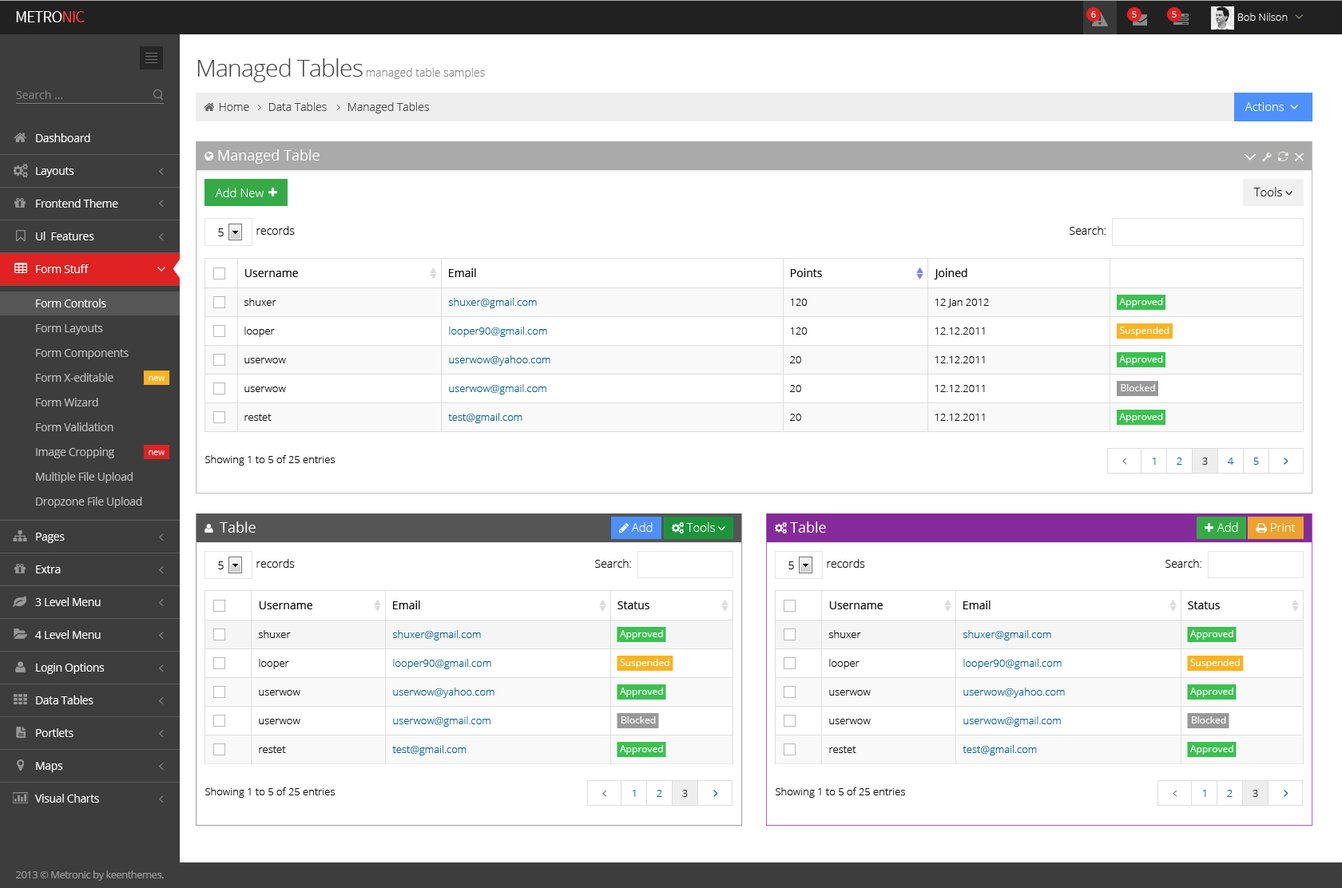
<style>
.page{position:relative;width:1342px;height:888px;background:#ffffff}
.page>*{position:absolute;margin:0}
.t1{font:16.7px "SourceSansPro-Regular";letter-spacing:-0.045em;color:#ffffff;text-transform:uppercase}
.t2{font:16.7px "SourceSansPro-Regular";letter-spacing:-0.045em;color:#ff3f3f;text-transform:uppercase}
.t3{font:8.8px "OpenSans-Light";color:#ffffff}
.t4{font:10.4px "OpenSans-Light";color:#ffffff}
.t5{font:24px "OpenSans-Light";letter-spacing:-0.025em;color:#444444}
.t6{font:11.2px "OpenSans-Light";color:#888888}
.t7{font:11.2px "OpenSans";color:#7d7d7d}
.t8{font:11.2px "OpenSans-Light";color:#444444}
.t9{font:12px "OpenSans-Light";color:#ffffff}
.t10{font:11.2px "OpenSans";letter-spacing:-0.025em;color:#ffffff}
.t11{font:14.4px "OpenSans";color:#ffffff}
.t12{font:12px "OpenSans-Light";color:#282626}
.t13{font:11.2px "OpenSans-Light";color:#131111}
.t14{font:11.2px "OpenSans";color:#131111}
.t15{font:11.2px "OpenSans";letter-spacing:-0.025em;color:#fefefe}
.t16{font:10.4px "OpenSans-Light";color:#131111}
.t17{font:10.4px "OpenSans-Light";color:#0d638f}
.t18{font:9.6px "OpenSans";color:#ffffff}
.t19{font:11.2px "OpenSans";letter-spacing:-0.025em;color:#bdbdbd}
.t20{font:10.4px "OpenSans-Light";letter-spacing:0.02em;color:#0d638f}
.t21{font:10.4px "OpenSans-Light";letter-spacing:0.02em;color:#2a2b2c}
.t22{font:10.4px "OpenSans";letter-spacing:-0.04em;color:#999999}
</style>
<div class="page">
<p class="t1" style="left:16px;top:11px;width:69px;height:11px">Metro<span class="t2">nic</span></p>
<p class="t3" style="left:1091px;top:11px;width:5px;height:7px">6</p>
<p class="t3" style="left:1132px;top:11px;width:5px;height:7px">5</p>
<p class="t3" style="left:1172px;top:11px;width:5px;height:7px">5</p>
<p class="t4" style="left:1238px;top:13px;width:50px;height:8px">Bob Nilson</p>
<p class="t5" style="left:197px;top:58px;width:166px;height:24px">Managed Tables</p>
<p class="t6" style="left:366px;top:68px;width:119px;height:11px">managed table samples</p>
<p class="t7" style="left:16px;top:90px;width:47px;height:9px">Search ...</p>
<p class="t8" style="left:220px;top:103px;width:29px;height:8px">Home</p>
<p class="t8" style="left:269px;top:102px;width:58px;height:9px">Data Tables</p>
<p class="t8" style="left:348px;top:102px;width:81px;height:11px">Managed Tables</p>
<p class="t9" style="left:1245px;top:102px;width:40px;height:9px">Actions</p>
<p class="t10" style="left:36px;top:133px;width:54px;height:9px">Dashboard</p>
<p class="t11" style="left:218px;top:149px;width:102px;height:15px">Managed Table</p>
<p class="t10" style="left:36px;top:167px;width:38px;height:10px">Layouts</p>
<p class="t9" style="left:215px;top:188px;width:49px;height:9px">Add New</p>
<p class="t12" style="left:1254px;top:187px;width:28px;height:10px">Tools</p>
<p class="t10" style="left:36px;top:199px;width:82px;height:9px">Frontend Theme</p>
<p class="t10" style="left:36px;top:232px;width:58px;height:8px">Ul  Features</p>
<p class="t13" style="left:218px;top:228px;width:6px;height:8px">5</p>
<p class="t13" style="left:256px;top:226px;width:39px;height:9px">records</p>
<p class="t13" style="left:1070px;top:226px;width:36px;height:9px">Search:</p>
<p class="t10" style="left:36px;top:264px;width:53px;height:9px">Form Stuff</p>
<p class="t14" style="left:244px;top:269px;width:54px;height:8px">Username</p>
<p class="t14" style="left:449px;top:268px;width:27px;height:9px">Email</p>
<p class="t14" style="left:791px;top:268px;width:31px;height:9px">Points</p>
<p class="t14" style="left:934px;top:268px;width:34px;height:12px">Joined</p>
<p class="t15" style="left:36px;top:299px;width:70px;height:9px">Form Controls</p>
<p class="t16" style="left:244px;top:298px;width:32px;height:8px">shuxer</p>
<p class="t17" style="left:448px;top:298px;width:89px;height:10px">shuxer@gmail.com</p>
<p class="t16" style="left:790px;top:299px;width:17px;height:7px">120</p>
<p class="t16" style="left:935px;top:299px;width:54px;height:9px">12 Jan 2012</p>
<p class="t18" style="left:1119px;top:298px;width:44px;height:10px">Approved</p>
<p class="t19" style="left:36px;top:324px;width:67px;height:11px">Form Layouts</p>
<p class="t16" style="left:244px;top:327px;width:31px;height:10px">looper</p>
<p class="t17" style="left:449px;top:327px;width:98px;height:10px">looper90@gmail.com</p>
<p class="t16" style="left:790px;top:328px;width:17px;height:7px">120</p>
<p class="t16" style="left:935px;top:328px;width:50px;height:7px">12.12.2011</p>
<p class="t18" style="left:1120px;top:327px;width:50px;height:9px">Suspended</p>
<p class="t19" style="left:36px;top:349px;width:93px;height:11px">Form Components</p>
<p class="t16" style="left:244px;top:358px;width:42px;height:6px">userwow</p>
<p class="t17" style="left:449px;top:356px;width:101px;height:10px">userwow@yahoo.com</p>
<p class="t16" style="left:790px;top:356px;width:11px;height:8px">20</p>
<p class="t16" style="left:935px;top:356px;width:50px;height:8px">12.12.2011</p>
<p class="t18" style="left:1119px;top:356px;width:44px;height:9px">Approved</p>
<p class="t19" style="left:36px;top:373px;width:77px;height:9px">Form X-editable</p>
<p class="t3" style="left:149px;top:376px;width:16px;height:5px">new</p>
<p class="t16" style="left:244px;top:387px;width:42px;height:5px">userwow</p>
<p class="t17" style="left:449px;top:384px;width:97px;height:11px">userwow@gmail.com</p>
<p class="t16" style="left:790px;top:385px;width:11px;height:7px">20</p>
<p class="t16" style="left:935px;top:385px;width:50px;height:7px">12.12.2011</p>
<p class="t18" style="left:1121px;top:384px;width:34px;height:7px">Blocked</p>
<p class="t19" style="left:36px;top:398px;width:62px;height:9px">Form Wizard</p>
<p class="t16" style="left:244px;top:414px;width:28px;height:7px">restet</p>
<p class="t17" style="left:448px;top:413px;width:75px;height:10px">test@gmail.com</p>
<p class="t16" style="left:790px;top:414px;width:11px;height:7px">20</p>
<p class="t16" style="left:935px;top:414px;width:50px;height:7px">12.12.2011</p>
<p class="t18" style="left:1119px;top:413px;width:44px;height:10px">Approved</p>
<p class="t19" style="left:36px;top:423px;width:77px;height:8px">Form Validation</p>
<p class="t19" style="left:36px;top:447px;width:78px;height:12px">Image Cropping</p>
<p class="t3" style="left:149px;top:451px;width:16px;height:4px">new</p>
<p class="t16" style="left:205px;top:455px;width:130px;height:11px">Showing 1 to 5 of 25 entries</p>
<p class="t20" style="left:1153px;top:458px;width:3px;height:7px">1</p>
<p class="t20" style="left:1177px;top:458px;width:5px;height:7px">2</p>
<p class="t21" style="left:1202px;top:458px;width:6px;height:7px">3</p>
<p class="t20" style="left:1227px;top:458px;width:7px;height:7px">4</p>
<p class="t20" style="left:1254px;top:458px;width:5px;height:7px">5</p>
<p class="t19" style="left:36px;top:472px;width:97px;height:11px">Multiple File Upload</p>
<p class="t19" style="left:36px;top:497px;width:106px;height:11px">Dropzone File Upload</p>
<p class="t11" style="left:220px;top:522px;width:36px;height:11px">Table</p>
<p class="t11" style="left:790px;top:522px;width:36px;height:11px">Table</p>
<p class="t10" style="left:36px;top:533px;width:29px;height:10px">Pages</p>
<p class="t9" style="left:631px;top:523px;width:22px;height:9px">Add</p>
<p class="t9" style="left:686px;top:523px;width:29px;height:9px">Tools</p>
<p class="t9" style="left:1217px;top:523px;width:21px;height:9px">Add</p>
<p class="t9" style="left:1271px;top:523px;width:25px;height:9px">Print</p>
<p class="t10" style="left:36px;top:566px;width:25px;height:8px">Extra</p>
<p class="t13" style="left:218px;top:562px;width:6px;height:8px">5</p>
<p class="t13" style="left:256px;top:559px;width:39px;height:9px">records</p>
<p class="t13" style="left:595px;top:559px;width:36px;height:9px">Search:</p>
<p class="t13" style="left:789px;top:562px;width:5px;height:8px">5</p>
<p class="t13" style="left:827px;top:559px;width:38px;height:9px">records</p>
<p class="t13" style="left:1166px;top:559px;width:36px;height:9px">Search:</p>
<p class="t10" style="left:35px;top:598px;width:66px;height:8px">3 Level Menu</p>
<p class="t14" style="left:259px;top:602px;width:53px;height:8px">Username</p>
<p class="t14" style="left:393px;top:601px;width:27px;height:9px">Email</p>
<p class="t14" style="left:618px;top:602px;width:32px;height:8px">Status</p>
<p class="t14" style="left:829px;top:602px;width:54px;height:8px">Username</p>
<p class="t14" style="left:964px;top:601px;width:27px;height:9px">Email</p>
<p class="t14" style="left:1188px;top:602px;width:32px;height:8px">Status</p>
<p class="t10" style="left:35px;top:630px;width:66px;height:9px">4 Level Menu</p>
<p class="t16" style="left:258px;top:630px;width:33px;height:8px">shuxer</p>
<p class="t17" style="left:392px;top:630px;width:89px;height:11px">shuxer@gmail.com</p>
<p class="t18" style="left:620px;top:630px;width:43px;height:10px">Approved</p>
<p class="t16" style="left:828px;top:630px;width:33px;height:8px">shuxer</p>
<p class="t17" style="left:963px;top:630px;width:88px;height:11px">shuxer@gmail.com</p>
<p class="t18" style="left:1190px;top:630px;width:44px;height:10px">Approved</p>
<p class="t10" style="left:36px;top:663px;width:69px;height:11px">Login Options</p>
<p class="t16" style="left:259px;top:659px;width:30px;height:11px">looper</p>
<p class="t17" style="left:393px;top:659px;width:98px;height:11px">looper90@gmail.com</p>
<p class="t18" style="left:620px;top:659px;width:50px;height:10px">Suspended</p>
<p class="t16" style="left:829px;top:659px;width:31px;height:11px">looper</p>
<p class="t17" style="left:964px;top:659px;width:98px;height:11px">looper90@gmail.com</p>
<p class="t18" style="left:1190px;top:659px;width:50px;height:10px">Suspended</p>
<p class="t17" style="left:393px;top:688px;width:102px;height:10px">userwow@yahoo.com</p>
<p class="t18" style="left:620px;top:688px;width:43px;height:9px">Approved</p>
<p class="t17" style="left:964px;top:688px;width:101px;height:10px">userwow@yahoo.com</p>
<p class="t18" style="left:1190px;top:688px;width:44px;height:9px">Approved</p>
<p class="t10" style="left:36px;top:696px;width:57px;height:9px">Data Tables</p>
<p class="t16" style="left:259px;top:690px;width:41px;height:6px">userwow</p>
<p class="t16" style="left:829px;top:690px;width:42px;height:6px">userwow</p>
<p class="t16" style="left:259px;top:719px;width:41px;height:6px">userwow</p>
<p class="t17" style="left:393px;top:717px;width:98px;height:10px">userwow@gmail.com</p>
<p class="t18" style="left:622px;top:717px;width:34px;height:7px">Blocked</p>
<p class="t16" style="left:829px;top:719px;width:42px;height:6px">userwow</p>
<p class="t17" style="left:964px;top:717px;width:97px;height:10px">userwow@gmail.com</p>
<p class="t18" style="left:1192px;top:717px;width:34px;height:7px">Blocked</p>
<p class="t10" style="left:36px;top:729px;width:38px;height:8px">Portlets</p>
<p class="t16" style="left:259px;top:746px;width:27px;height:7px">restet</p>
<p class="t17" style="left:392px;top:745px;width:75px;height:11px">test@gmail.com</p>
<p class="t18" style="left:620px;top:745px;width:43px;height:10px">Approved</p>
<p class="t16" style="left:829px;top:746px;width:27px;height:7px">restet</p>
<p class="t17" style="left:963px;top:745px;width:74px;height:11px">test@gmail.com</p>
<p class="t18" style="left:1190px;top:745px;width:44px;height:10px">Approved</p>
<p class="t10" style="left:36px;top:762px;width:27px;height:11px">Maps</p>
<p class="t10" style="left:35px;top:794px;width:64px;height:9px">Visual Charts</p>
<p class="t16" style="left:205px;top:788px;width:130px;height:10px">Showing 1 to 5 of 25 entries</p>
<p class="t20" style="left:633px;top:790px;width:3px;height:7px">1</p>
<p class="t20" style="left:657px;top:790px;width:5px;height:7px">2</p>
<p class="t21" style="left:682px;top:790px;width:6px;height:7px">3</p>
<p class="t16" style="left:776px;top:788px;width:129px;height:10px">Showing 1 to 5 of 25 entries</p>
<p class="t20" style="left:1203px;top:790px;width:3px;height:7px">1</p>
<p class="t20" style="left:1227px;top:790px;width:6px;height:7px">2</p>
<p class="t21" style="left:1253px;top:790px;width:5px;height:7px">3</p>
<p class="t22" style="left:16px;top:871px;width:148px;height:10px">2013 © Metronic by keenthemes.</p>
</div>
